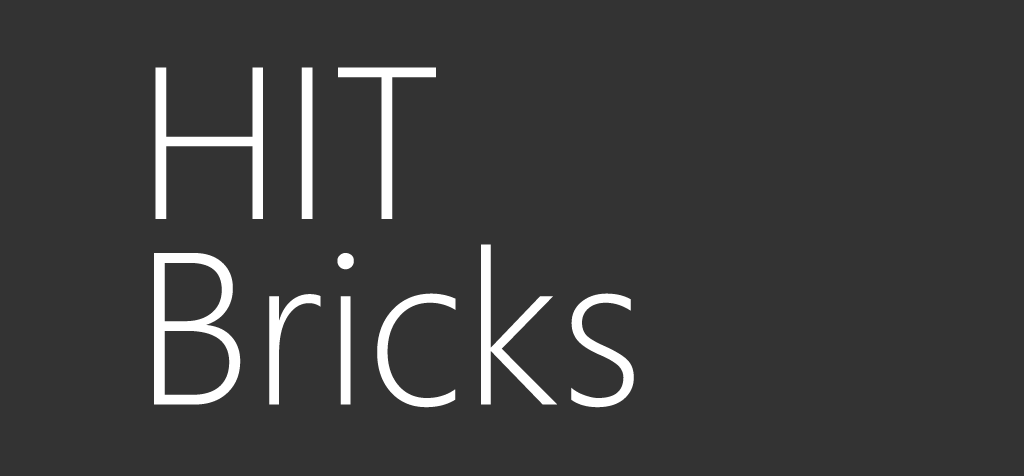
<style>
.page{position:relative;width:1024px;height:476px;background:#333333}
.page>*{position:absolute;margin:0}
.t1{font:200px "MicrosoftYaHeiLight";color:#ffffff}
</style>
<div class="page">
<p class="t1" style="left:155px;top:67px;width:281px;height:152px">HIT</p>
<p class="t1" style="left:154px;top:244px;width:480px;height:164px">Bricks</p>
</div>
